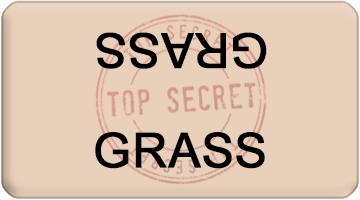
<style>
.page{position:relative;width:360px;height:200px;background:#e8d0bb}
.page>*{position:absolute;margin:0}
.t1{font:48px "ArialMT";color:#000000;font-weight:bold}
</style>
<div class="page">
<p class="t1" style="left:96px;top:32px;width:171px;height:37px;rotate:180deg">GRASS</p>
<p class="t1" style="left:95px;top:132px;width:170px;height:37px">GRASS</p>
</div>
